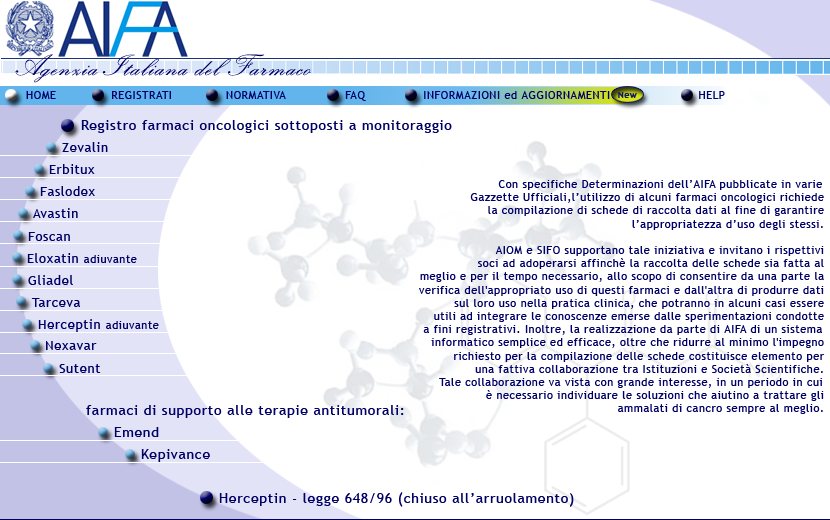
<style>
.page{position:relative;width:830px;height:520px;background:#ffffff}
.page>*{position:absolute;margin:0}
.t1{font:11px "TrebuchetMS";letter-spacing:0.05em;color:#000066}
.t2{font:9px "TrebuchetMS-Bold";letter-spacing:0.05em;color:#0a166c}
.t3{font:14px "TrebuchetMS";letter-spacing:0.05em;color:#000066}
.t4{font:13px "TrebuchetMS";letter-spacing:0.05em;color:#000066}
</style>
<div class="page">
<p class="t1" style="left:26px;top:91px;width:30px;height:8px">HOME</p>
<p class="t1" style="left:112px;top:91px;width:59px;height:8px">REGISTRATI</p>
<p class="t1" style="left:226px;top:91px;width:60px;height:8px">NORMATIVA</p>
<p class="t1" style="left:345px;top:91px;width:21px;height:10px">FAQ</p>
<p class="t1" style="left:424px;top:91px;width:186px;height:8px">INFORMAZIONI ed AGGIORNAMENTI</p>
<p class="t2" style="left:618px;top:92px;width:19px;height:6px">New</p>
<p class="t1" style="left:699px;top:91px;width:26px;height:8px">HELP</p>
<p class="t3" style="left:81px;top:120px;width:371px;height:13px">Registro farmaci oncologici sottoposti a monitoraggio</p>
<p class="t4" style="left:62px;top:142px;width:46px;height:10px">Zevalin</p>
<p class="t4" style="left:49px;top:164px;width:46px;height:10px">Erbitux</p>
<p class="t1" style="left:419px;top:180px;width:406px;height:234px;text-align:right">Con specifiche Determinazioni dell’AIFA pubblicate in varie<br>Gazzette Ufficiali,l’utilizzo di alcuni farmaci oncologici richiede<br>la compilazione di schede di raccolta dati al fine di garantire<br>l’appropriatezza d’uso degli stessi.<br><br>AIOM e SIFO supportano tale iniziativa e invitano i rispettivi<br>soci ad adoperarsi affinchè la raccolta delle schede sia fatta al<br>meglio e per il tempo necessario, allo scopo di consentire da una parte la<br>verifica dell'appropriato uso di questi farmaci e dall'altra di produrre dati<br>sul loro uso nella pratica clinica, che potranno in alcuni casi essere<br>utili ad integrare le conoscenze emerse dalle sperimentazioni condotte<br> a fini registrativi. Inoltre, la realizzazione da parte di AIFA di un sistema<br>informatico semplice ed efficace, oltre che ridurre al minimo l'impegno<br>richiesto per la compilazione delle schede costituisce elemento per<br>una fattiva collaborazione tra Istituzioni e Società Scientifiche.<br>Tale collaborazione va vista con grande interesse, in un periodo in cui<br>è necessario individuare le soluzioni che aiutino a trattare gli<br>ammalati di cancro sempre al meglio.</p>
<p class="t4" style="left:40px;top:186px;width:55px;height:10px">Faslodex</p>
<p class="t4" style="left:33px;top:208px;width:45px;height:10px">Avastin</p>
<p class="t4" style="left:28px;top:232px;width:42px;height:9px">Foscan</p>
<p class="t1" style="left:27px;top:253px;width:110px;height:10px"><span class="t4">Eloxatin </span>adiuvante</p>
<p class="t4" style="left:28px;top:275px;width:45px;height:10px">Gliadel</p>
<p class="t4" style="left:31px;top:298px;width:49px;height:9px">Tarceva</p>
<p class="t4" style="left:38px;top:319px;width:121px;height:13px">Herceptin <span class="t1">adiuvante</span></p>
<p class="t4" style="left:46px;top:341px;width:51px;height:9px">Nexavar</p>
<p class="t4" style="left:59px;top:364px;width:42px;height:9px">Sutent</p>
<p class="t3" style="left:86px;top:405px;width:318px;height:13px">farmaci di supporto alle terapie antitumorali:</p>
<p class="t3" style="left:114px;top:427px;width:45px;height:10px">Emend</p>
<p class="t3" style="left:141px;top:449px;width:69px;height:13px">Kepivance</p>
<p class="t3" style="left:219px;top:492px;width:355px;height:15px">Herceptin - legge 648/96 (chiuso all’arruolamento)</p>
</div>
